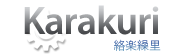
<style>
.page{position:relative;width:190px;height:55px;background:#ffffff}
.page>*{position:absolute;margin:0}
.t1{font:40px "MyriadPro-Semibold";letter-spacing:-0.025em}
.t2{font:12px "HiraKakuPro-W3";color:#4f6fac}
</style>
<div class="page">
<p class="t1" style="left:24px;top:5px;width:135px;height:30px">Karakuri</p>
<p class="t2" style="left:114px;top:39px;width:47px;height:12px">絡楽繰里</p>
</div>
